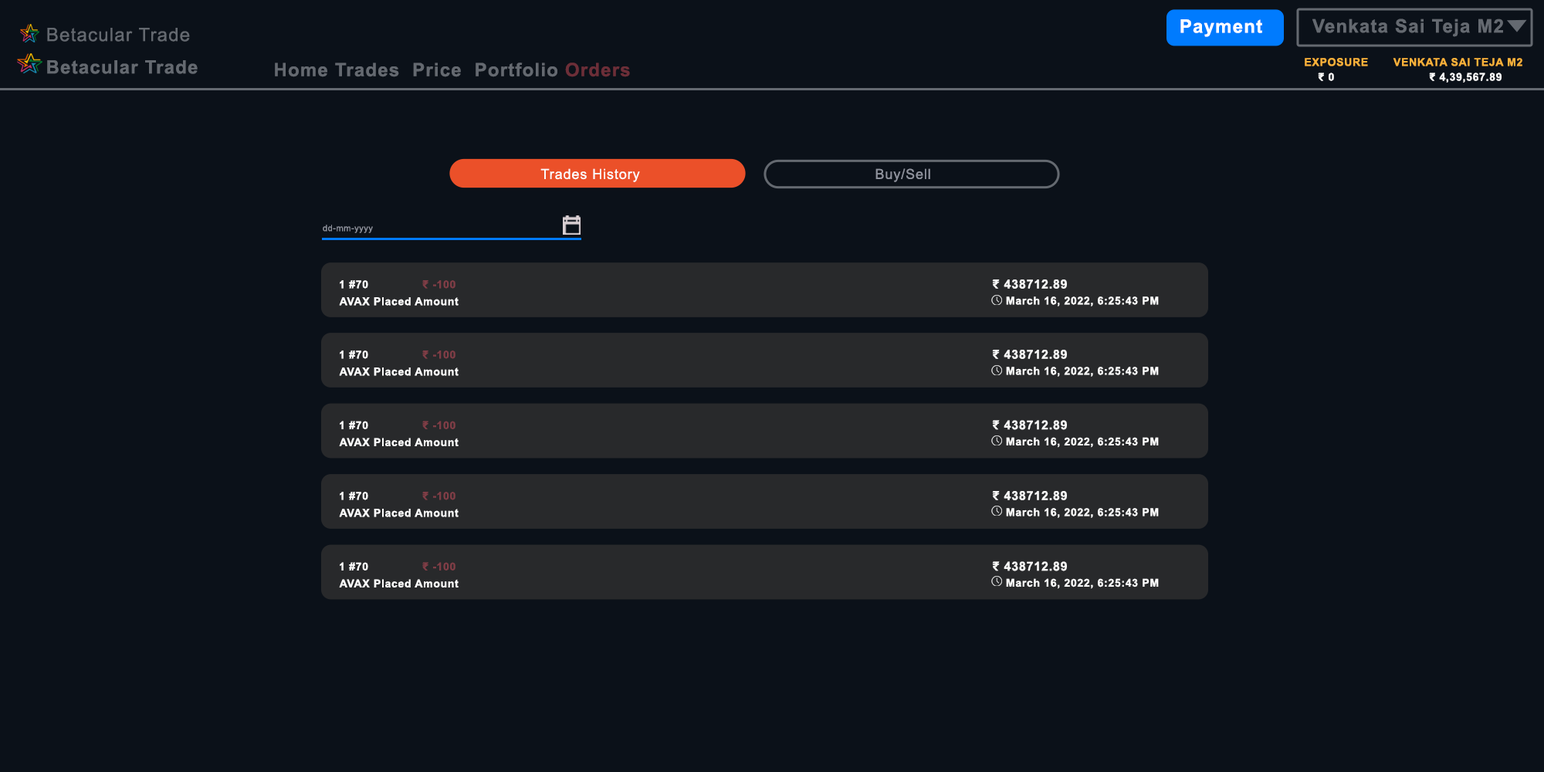
<style>
.page{position:relative;width:1544px;height:772px;background:#0b1119}
.page>*{position:absolute;margin:0}
.t1{font:18.5px "ArialMT";letter-spacing:0.05em;color:#646970}
.t2{font:18.5px "Arial-BoldMT";letter-spacing:0.05em;color:#ffffff}
.t3{font:18.5px "Arial-BoldMT";letter-spacing:0.05em;color:#646970}
.t4{font:18.5px "Arial-BoldMT";letter-spacing:0.05em;color:#87442f}
.t5{font:18.5px "Arial-BoldMT";letter-spacing:0.05em;color:#6c2e38}
.t6{font:10.8px "Arial-BoldMT";letter-spacing:0.05em;color:#f9b23a}
.t7{font:10.8px "Arial-BoldMT";letter-spacing:0.05em;color:#fdfdfd}
.t8{font:13.9px "ArialMT";letter-spacing:0.05em;color:#fcfcfc}
.t9{font:13.9px "ArialMT";letter-spacing:0.05em;color:#8e929d}
.t10{font:8.5px "ArialMT";letter-spacing:0.05em;color:#8e929d}
.t11{font:10.8px "Arial-BoldMT";letter-spacing:0.05em;color:#7f3d46}
.t12{font:12.4px "Arial-BoldMT";letter-spacing:0.05em;color:#f8f8f8}
</style>
<div class="page">
<p class="t1" style="left:47px;top:28px;width:143px;height:14px">Betacular Trade</p>
<p class="t2" style="left:1181px;top:19px;width:81px;height:18px">Payment</p>
<p class="t3" style="left:1313px;top:19px;width:190px;height:18px">Venkata Sai Teja M2</p>
<p class="t3" style="left:47px;top:60px;width:151px;height:14px">Betacular Trade</p>
<p class="t3" style="left:275px;top:63px;width:355px;height:14px"><span class="t4">                  </span>Home Trades  Price  Portfolio <span class="t5">Orders</span></p>
<p class="t6" style="left:1305px;top:58px;width:218px;height:8px">EXPOSURE       VENKATA SAI TEJA M2</p>
<p class="t7" style="left:1318px;top:73px;width:184px;height:10px">₹ 0     ₹ 4,39,567.89</p>
<p class="t8" style="left:541px;top:168px;width:99px;height:14px">Trades History</p>
<p class="t9" style="left:876px;top:168px;width:54px;height:14px">Buy/Sell</p>
<p class="t10" style="left:323px;top:225px;width:50px;height:8px">dd-mm-yyyy</p>
<p class="t11" style="left:340px;top:280px;width:116px;height:9px"><span class="t7">1 #70  </span>₹ -100</p>
<p class="t12" style="left:992px;top:280px;width:75px;height:9px">₹ 438712.89</p>
<p class="t7" style="left:339px;top:297px;width:120px;height:9px">AVAX Placed Amount</p>
<p class="t7" style="left:1006px;top:297px;width:153px;height:10px">March 16, 2022, 6:25:43 PM</p>
<p class="t11" style="left:340px;top:351px;width:116px;height:8px"><span class="t7">1 #70  </span>₹ -100</p>
<p class="t12" style="left:992px;top:350px;width:75px;height:9px">₹ 438712.89</p>
<p class="t7" style="left:339px;top:368px;width:120px;height:8px">AVAX Placed Amount</p>
<p class="t7" style="left:1006px;top:367px;width:153px;height:10px">March 16, 2022, 6:25:43 PM</p>
<p class="t11" style="left:340px;top:421px;width:116px;height:8px"><span class="t7">1 #70  </span>₹ -100</p>
<p class="t12" style="left:992px;top:420px;width:75px;height:10px">₹ 438712.89</p>
<p class="t7" style="left:339px;top:438px;width:120px;height:8px">AVAX Placed Amount</p>
<p class="t7" style="left:1006px;top:437px;width:153px;height:11px">March 16, 2022, 6:25:43 PM</p>
<p class="t11" style="left:340px;top:492px;width:116px;height:8px"><span class="t7">1 #70  </span>₹ -100</p>
<p class="t12" style="left:992px;top:491px;width:75px;height:9px">₹ 438712.89</p>
<p class="t7" style="left:339px;top:509px;width:120px;height:8px">AVAX Placed Amount</p>
<p class="t7" style="left:1006px;top:508px;width:153px;height:10px">March 16, 2022, 6:25:43 PM</p>
<p class="t11" style="left:340px;top:562px;width:116px;height:9px"><span class="t7">1 #70  </span>₹ -100</p>
<p class="t12" style="left:992px;top:561px;width:75px;height:10px">₹ 438712.89</p>
<p class="t7" style="left:339px;top:579px;width:120px;height:9px">AVAX Placed Amount</p>
<p class="t7" style="left:1006px;top:578px;width:153px;height:11px">March 16, 2022, 6:25:43 PM</p>
</div>
